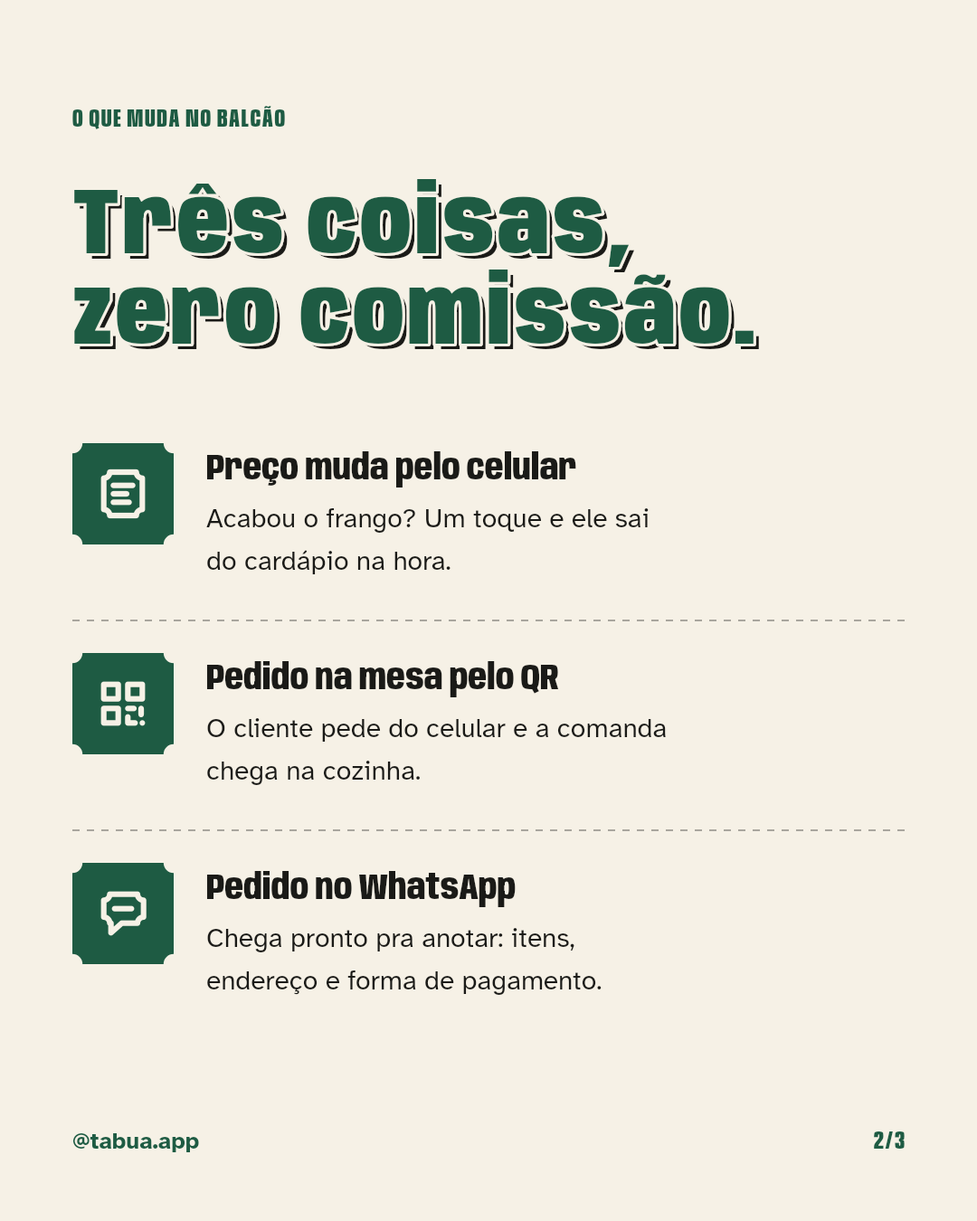
<style>
.page{position:relative;width:977px;height:1221px;background:#f6f1e6}
.page>*{position:absolute;margin:0}
.t1{font:25.3px "Anybody-ExtraBold-W60";letter-spacing:0.06em;color:#1e5b43}
.t2{font:94.1px/90.4px "Anybody-Black-W75";letter-spacing:0.034em;color:#1e5b43}
.t3{font:94.1px/90.4px "Anybody-Black-W75";letter-spacing:0.034em}
.t4{font:36.2px "Anybody-ExtraBold-W75";color:#1a1a17}
.t5{font:27.1px/42.5px "AtkinsonHyperlegible-Regular";color:#1a1a17}
.t6{font:23.5px "AtkinsonHyperlegible-Bold";color:#1e5b43}
</style>
<div class="page">
<p class="t1" style="left:72px;top:106px;width:213px;height:23px">O QUE MUDA NO BALCÃO</p>
<p class="t2" style="left:71px;top:176px;width:685px;height:170px">Três coisas,<br>zero comissão.</p>
<p class="t3" style="left:80px;top:184px;width:679px;height:165px">Três coisas,<br>zero comissão.</p>
<p class="t4" style="left:206px;top:451px;width:370px;height:36px">Preço muda pelo celular</p>
<p class="t5" style="left:206px;top:508px;width:442px;height:66px">Acabou o frango? Um toque e ele sai<br>do cardápio na hora.</p>
<p class="t4" style="left:206px;top:661px;width:353px;height:36px">Pedido na mesa pelo QR</p>
<p class="t5" style="left:207px;top:718px;width:459px;height:67px">O cliente pede do celular e a comanda<br>chega na cozinha.</p>
<p class="t4" style="left:206px;top:871px;width:309px;height:36px">Pedido no WhatsApp</p>
<p class="t5" style="left:207px;top:928px;width:394px;height:67px">Chega pronto pra anotar: itens,<br>endereço e forma de pagamento.</p>
<p class="t6" style="left:72px;top:1133px;width:127px;height:19px">@tabua.app</p>
<p class="t1" style="left:874px;top:1131px;width:30px;height:18px">2/3</p>
</div>
